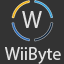
<style>
.page{position:relative;width:64px;height:64px;background:#333333}
.page>*{position:absolute;margin:0}
.t1{font:24px "MyriadPro-Regular";color:#e0e0e0}
.t2{font:18px "MyriadPro-Regular";color:#e0e0e0}
</style>
<div class="page">
<p class="t1" style="left:22px;top:11px;width:20px;height:17px">W</p>
<p class="t2" style="left:5px;top:47px;width:56px;height:17px">WiiByte</p>
</div>
